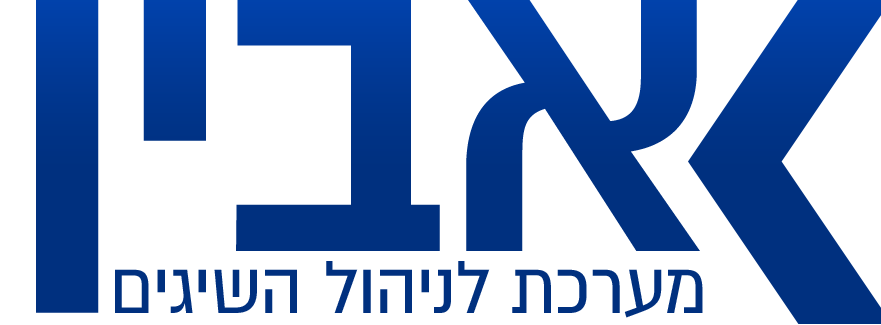
<style>
.page{position:relative;width:881px;height:325px;background:#ffffff}
.page>*{position:absolute;margin:0}
.t1{font:486px "AlmoniDLAAA-Bold";letter-spacing:-0.01em;color:#00307f}
.t2{font:83.5px "AlmoniDLAAA";letter-spacing:-0.01em;color:#00307f}
</style>
<div class="page">
<p class="t1" style="left:36px;top:0px;width:664px;height:313px">אבין</p>
<p class="t2" style="left:115px;top:261px;width:588px;height:57px">מערכת לניהול השיגים</p>
</div>
